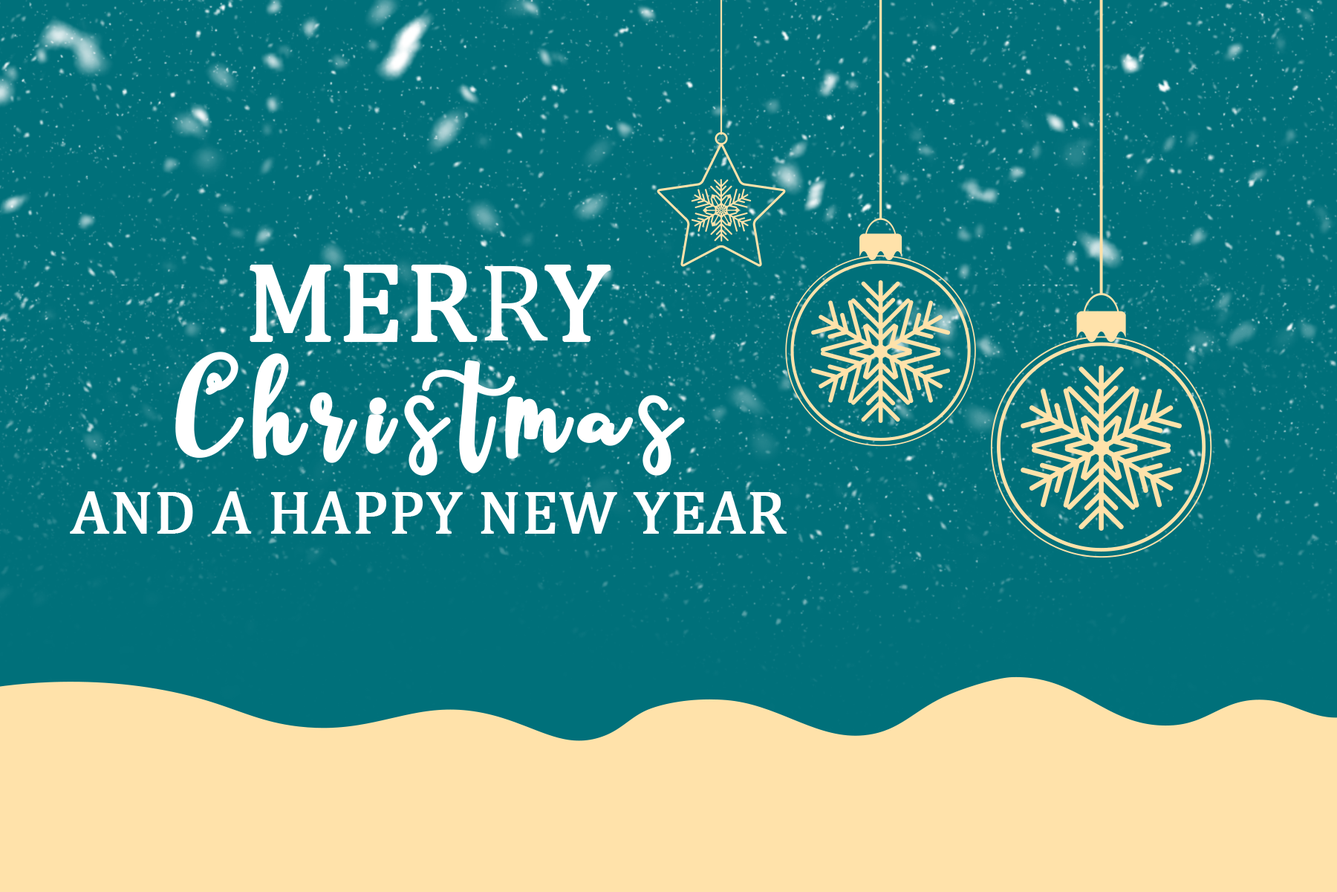
<style>
.page{position:relative;width:1337px;height:892px;background:#00707a}
.page>*{position:absolute;margin:0}
.t1{font:61.9px/71.2px "CambriaMath";color:#ffffff;text-transform:uppercase;font-weight:bold}
.t2{font:111.5px/108.4px "CambriaMath";color:#ffffff;text-transform:uppercase;font-weight:bold}
.t3{font:145.5px/120.7px "Starlight-Regular";letter-spacing:0.1em;color:#ffffff;text-transform:uppercase;font-weight:bold}
.t4{font:145.5px/120.7px "Starlight-Regular";letter-spacing:0.1em;color:#ffffff;font-weight:bold}
</style>
<div class="page">
<p class="t1" style="left:70px;top:264px;width:717px;height:269px;text-align:center"><span class="t2">Merry<br></span><span class="t3">C</span><span class="t4">hristmas<br></span>and a happy new year</p>
</div>
